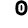
<style>
.page{position:relative;width:28px;height:28px;background:#ffffff}
.page>*{position:absolute;margin:0}
.t1{font:11.7px "DOUYINSANSBOLD-GB";color:#ffffff}
</style>
<div class="page">
<p class="t1" style="left:18px;top:3px;width:7px;height:10px">0</p>
</div>
